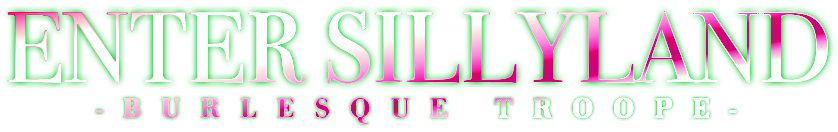
<style>
.page{position:relative;width:838px;height:132px;background:#ffffff}
.page>*{position:absolute;margin:0}
.t1{font:100px "BodoniSvtyTwoITCTTBook"}
.t2{font:28px "BodoniAntiquaT-DemiBold";letter-spacing:0.7em;font-weight:bold}
</style>
<div class="page">
<p class="t1" style="left:7px;top:11px;width:821px;height:73px">ENTER SILLYLAND</p>
<p class="t2" style="left:96px;top:97px;width:641px;height:27px">-BURLESQUE TROOPE-</p>
</div>
